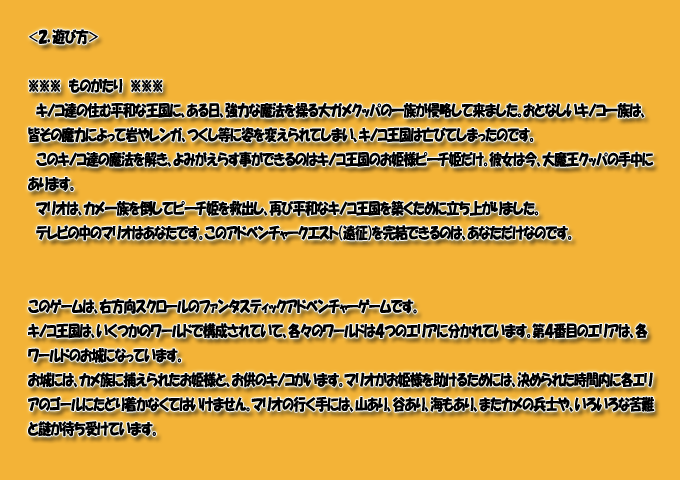
<style>
.page{position:relative;width:680px;height:480px;background:#f3b337}
.page>*{position:absolute;margin:0}
.t1{font:15.4px "HGPSoeiKakupoptai";letter-spacing:-0.015em;color:#000000;scale:0.82 1}
</style>
<div class="page">
<p class="t1" style="left:28px;top:29px;width:627px;height:408px">＜２．遊び方＞<br><br>※※※　ものがたり　※※※<br>　キノコ達の住む平和な王国に、ある日、強力な魔法を操る大ガメクッパの一族が侵略して来ました。おとなしいキノコ一族は、皆その魔力によって岩やレンガ、つくし等に姿を変えられてしまい、キノコ王国は亡びてしまったのです。<br>　このキノコ達の魔法を解き、よみがえらす事ができるのはキノコ王国のお姫様ピーチ姫だけ。彼女は今、大魔王クッパの手中にあります。<br>　マリオは、カメ一族を倒してピーチ姫を救出し、再び平和なキノコ王国を築くために立ち上がりました。<br>　テレビの中のマリオはあなたです。このアドベンチャークエスト（遠征）を完結できるのは、あなただけなのです。<br><br><br>このゲームは、右方向スクロールのファンタスティックアドベンチャーゲームです。<br>キノコ王国は、いくつかのワールドで構成されていて、各々のワールドは４つのエリアに分かれています。第４番目のエリアは、各ワールドのお城になっています。<br>お城には、カメ族に捕えられたお姫様と、お供のキノコがいます。マリオがお姫様を助けるためには、決められた時間内に各エリアのゴールにたどり着かなくてはいけません。マリオの行く手には、山あり、谷あり、海もあり、またカメの兵士や、いろいろな苦難と謎が待ち受けています。<br>最後のお城に捕えられているお姫様を、無事に救い出せるかどうか、それはあなたの腕次第、カメ一族を様々なテクニックを使って撃退してください。</p>
</div>
